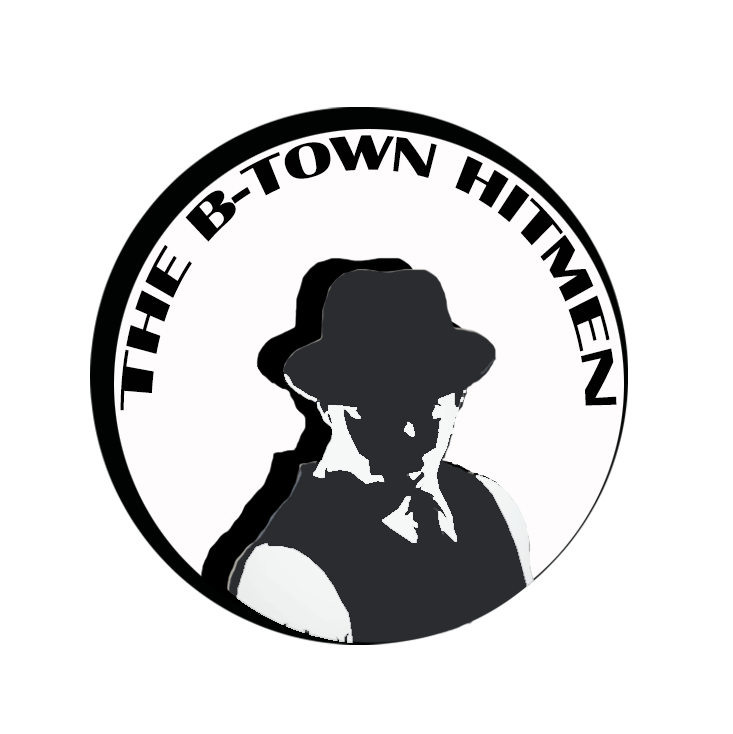
<style>
.page{position:relative;width:733px;height:734px;background:#ffffff}
.page>*{position:absolute;margin:0}
.t1{font:50.3px "BritannicBold";color:#010101;scale:0.9 1}
</style>
<div class="page">
<p class="t1" style="left:120px;top:135px;width:497px;height:276px;text-align:center">THE B-TOWN HITMEN</p>
</div>
